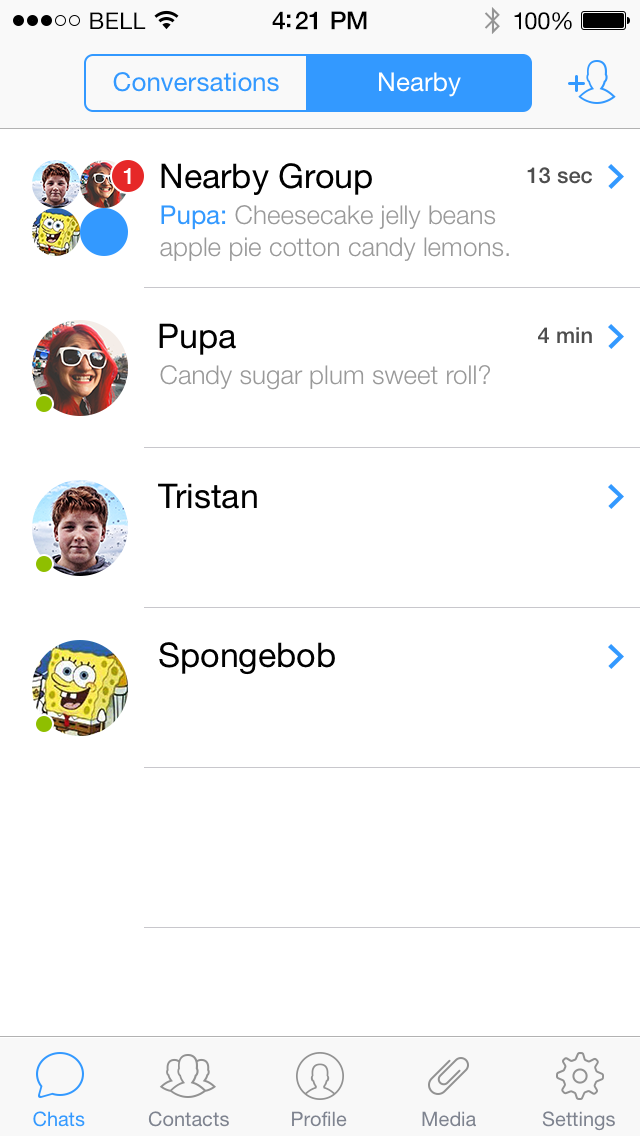
<style>
.page{position:relative;width:640px;height:1136px;background:#ffffff}
.page>*{position:absolute;margin:0}
.t1{font:23px "HelveticaNeue";letter-spacing:0.02em;color:#000000}
.t2{font:25px "HelveticaNeue-Medium";letter-spacing:-0.02em;color:#000000}
.t3{font:24px "HelveticaNeue";letter-spacing:-0.02em;color:#000000}
.t4{font:26px "HelveticaNeue";color:#3399ff}
.t5{font:26px "HelveticaNeue";color:#ffffff}
.t6{font:22px "HelveticaNeue-Medium";letter-spacing:-0.02em;color:#ffffff}
.t7{font:34px "HelveticaNeue";color:#000000}
.t8{font:22px "HelveticaNeue-Medium";color:#4d4d4d}
.t9{font:26px/32px "HelveticaNeue-Light";color:#999999}
.t10{font:26px/32px "HelveticaNeue";color:#3399ff}
.t11{font:26px "HelveticaNeue-Light";color:#999999}
.t12{font:20px "HelveticaNeue";color:#3399ff}
.t13{font:20px "HelveticaNeue";color:#7e838f}
</style>
<div class="page">
<p class="t1" style="left:90px;top:12px;width:56px;height:17px">BELL</p>
<p class="t2" style="left:272px;top:11px;width:95px;height:19px">4:21 PM</p>
<p class="t3" style="left:514px;top:12px;width:58px;height:18px">100%</p>
<p class="t4" style="left:113px;top:72px;width:166px;height:20px">Conversations</p>
<p class="t5" style="left:379px;top:72px;width:82px;height:25px">Nearby</p>
<p class="t6" style="left:123px;top:168px;width:8px;height:16px">1</p>
<p class="t7" style="left:161px;top:163px;width:211px;height:32px">Nearby Group</p>
<p class="t8" style="left:527px;top:167px;width:65px;height:17px">13 sec</p>
<p class="t9" style="left:160px;top:205px;width:349px;height:56px"><span class="t10">Pupa:</span> Cheesecake jelly beans apple pie cotton candy lemons.</p>
<p class="t7" style="left:159px;top:323px;width:77px;height:32px">Pupa</p>
<p class="t8" style="left:538px;top:327px;width:54px;height:16px">4 min</p>
<p class="t11" style="left:160px;top:365px;width:330px;height:25px">Candy sugar plum sweet roll?</p>
<p class="t7" style="left:158px;top:483px;width:99px;height:26px">Tristan</p>
<p class="t7" style="left:159px;top:642px;width:176px;height:33px">Spongebob</p>
<p class="t12" style="left:33px;top:1111px;width:52px;height:16px">Chats</p>
<p class="t13" style="left:148px;top:1111px;width:81px;height:16px">Contacts</p>
<p class="t13" style="left:292px;top:1111px;width:55px;height:16px">Profile</p>
<p class="t13" style="left:422px;top:1111px;width:54px;height:16px">Media</p>
<p class="t13" style="left:542px;top:1111px;width:73px;height:20px">Settings</p>
</div>
